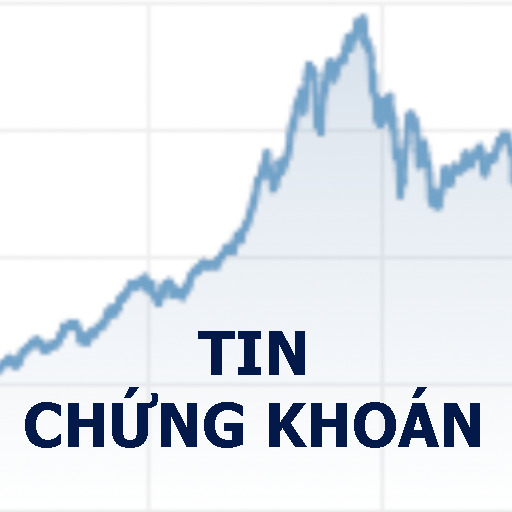
<style>
.page{position:relative;width:512px;height:512px;background:#ffffff}
.page>*{position:absolute;margin:0}
.t1{font:60px "Tahoma-Bold";color:#02194a}
</style>
<div class="page">
<p class="t1" style="left:25px;top:331px;width:455px;height:117px;text-align:center">TIN<br>CHỨNG KHOÁN</p>
</div>
